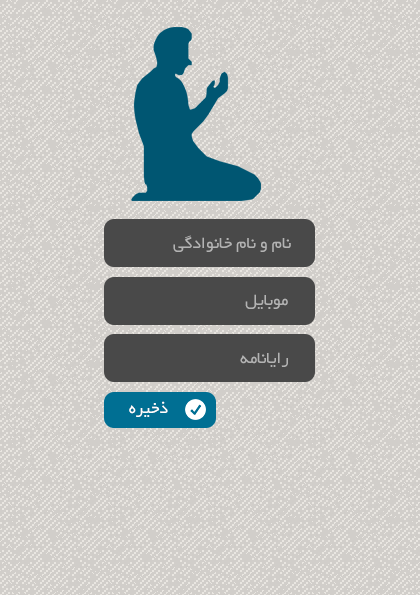
<style>
.page{position:relative;width:420px;height:595px;background:#d1ceca}
.page>*{position:absolute;margin:0}
.t1{font:18px "BYekan";color:#b3b3b3}
.t2{font:18px "BYekan";color:#ffffff}
</style>
<div class="page">
<p class="t1" style="left:173px;top:235px;width:118px;height:17px">نام و نام خانوادگی</p>
<p class="t1" style="left:245px;top:294px;width:43px;height:15px">موبایل</p>
<p class="t1" style="left:240px;top:352px;width:48px;height:15px">رایانامه</p>
<p class="t2" style="left:129px;top:401px;width:39px;height:16px">ذخیره</p>
</div>
